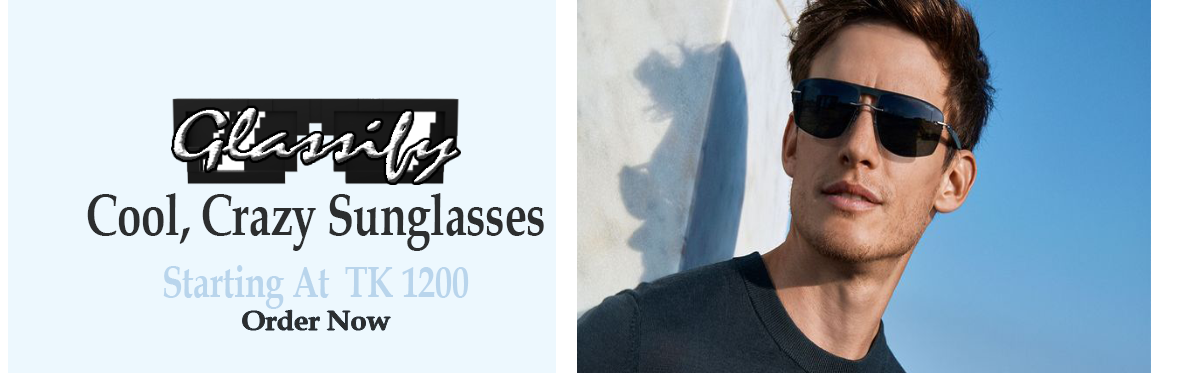
<style>
.page{position:relative;width:1180px;height:373px;background:#edf8fe}
.page>*{position:absolute;margin:0}
.t1{font:58.3px "BookAntiqua-Bold";letter-spacing:-0.01em;color:#2c2e2f;scale:0.76 1}
.t2{font:43.9px "BookAntiqua-Bold";letter-spacing:-0.01em;color:#b9d5ec;scale:0.78 1}
.t3{font:27.7px "BookAntiqua-Bold";letter-spacing:-0.01em;color:#2c2e2f;scale:1.05 1}
</style>
<div class="page">
<p class="t1" style="left:87px;top:193px;width:457px;height:58px">Cool, Crazy Sunglasses</p>
<p class="t2" style="left:163px;top:265px;width:306px;height:44px">Starting At  TK 1200</p>
<p class="t3" style="left:242px;top:310px;width:149px;height:20px">Order Now</p>
</div>
